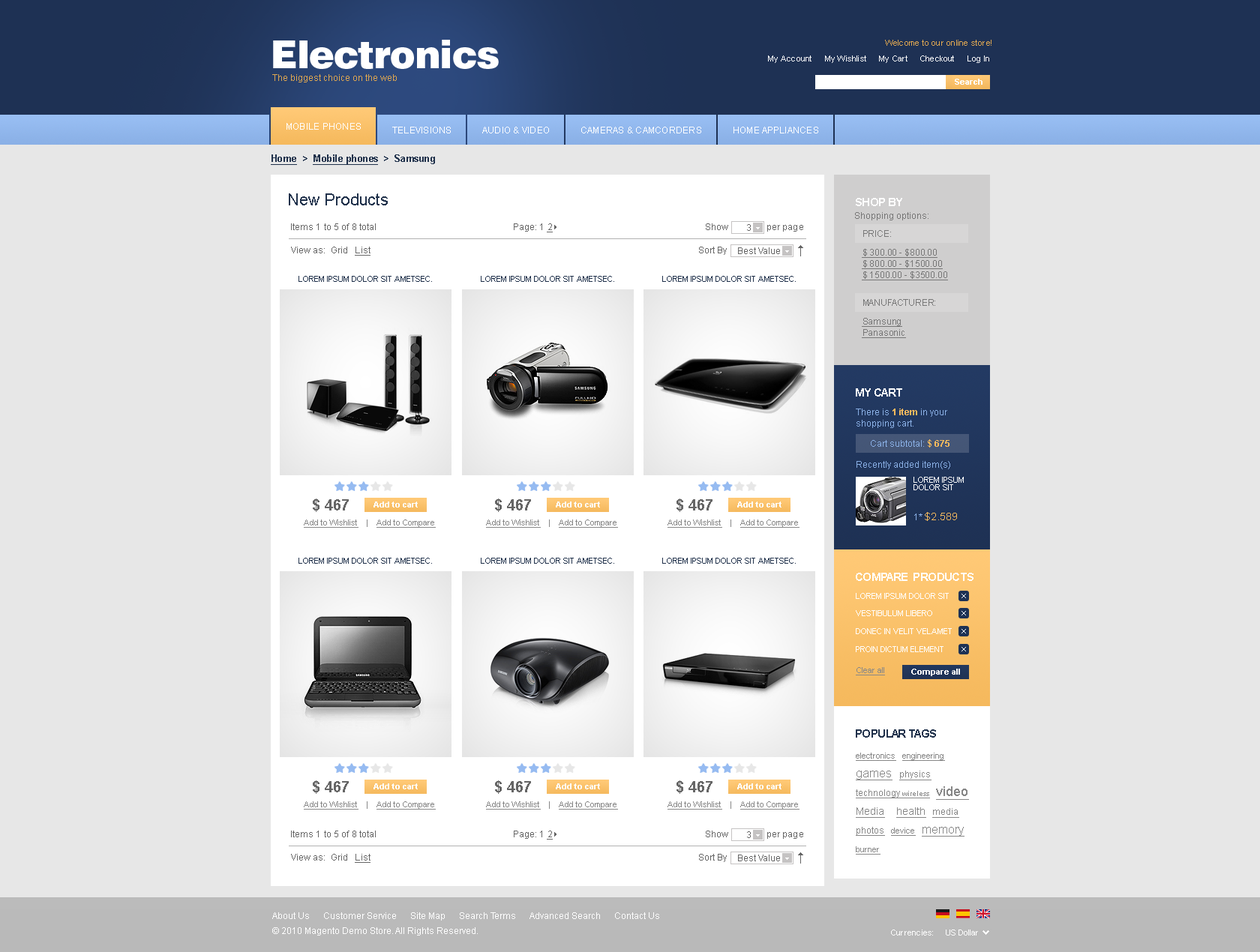
<style>
.page{position:relative;width:1260px;height:952px;background:#e7e7e7}
.page>*{position:absolute;margin:0}
.t1{font:38.2px "Swiss721BT-Black";letter-spacing:-0.02em;color:#ffffff}
.t2{font:8.2px "ArialMT";letter-spacing:0.02em;color:#dda651}
.t3{font:8.2px "ArialMT";letter-spacing:0.02em;color:#ffffff}
.t4{font:9px "ArialMT";color:#dda651}
.t5{font:8.2px "Arial-BoldMT";color:#fdfdfd}
.t6{font:9px "ArialMT";letter-spacing:0.02em;color:#ffffff;text-transform:uppercase}
.t7{font:9.8px "Arial-BoldMT";letter-spacing:-0.04em;color:#20314b;text-decoration:underline}
.t8{font:9.8px "Arial-BoldMT";letter-spacing:-0.04em;color:#20314b}
.t9{font:16.5px "ArialMT";color:#20314b}
.t10{font:11.2px "Arial-BoldMT";letter-spacing:-0.04em;color:#ffffff;text-transform:uppercase}
.t11{font:9px "ArialMT";color:#777777}
.t12{font:9px "ArialMT";letter-spacing:0.01em;color:#666666}
.t13{font:9px "ArialMT";letter-spacing:0.01em;color:#666666;text-decoration:underline}
.t14{font:9px "ArialMT";color:#666666}
.t15{font:9px "ArialMT";color:#777777;text-transform:uppercase}
.t16{font:9px/11.2px "ArialMT";color:#777777;text-decoration:underline}
.t17{font:8.2px "ArialMT";color:#20314b;text-transform:uppercase}
.t18{font:9px/11.2px "ArialMT";color:#8ab0e6}
.t19{font:9px/11.2px "Arial-BoldMT";color:#f5b95d}
.t20{font:9px "ArialMT";color:#8ab0e6}
.t21{font:9px "Arial-BoldMT";color:#f5b95d}
.t22{font:8.3px/7.5px "ArialMT";color:#ffffff;text-transform:uppercase}
.t23{font:15px "Arial-BoldMT";color:#666666}
.t24{font:8.2px "ArialMT";color:#878787;text-decoration:underline}
.t25{font:8.2px "ArialMT";color:#878787}
.t26{font:10.5px "ArialMT";color:#f5b95d;text-transform:uppercase}
.t27{font:8.3px "ArialMT";color:#ffffff;text-transform:uppercase}
.t28{font:8.3px/12px "ArialMT";color:#ffffff;text-transform:uppercase}
.t29{font:11.2px "Arial-BoldMT";letter-spacing:-0.04em;color:#20314b;text-transform:uppercase}
.t30{font:8.2px/18.7px "ArialMT";color:#878787;text-decoration:underline}
.t31{font:12px/18.7px "ArialMT";color:#878787;text-decoration:underline}
.t32{font:9px/18.7px "ArialMT";color:#878787;text-decoration:underline}
.t33{font:7.5px/18.7px "ArialMT";color:#878787;text-decoration:underline}
.t34{font:13.5px/18.7px "ArialMT";color:#878787;text-decoration:underline}
.t35{font:10.5px/15px "ArialMT";color:#878787;text-decoration:underline}
.t36{font:10.5px/18.7px "ArialMT";color:#878787;text-decoration:underline}
.t37{font:9px/15px "ArialMT";color:#ffffff}
.t38{font:8.2px "ArialMT";color:#ffffff}
</style>
<div class="page">
<p class="t1" style="left:273px;top:40px;width:226px;height:29px">Electronics</p>
<p class="t2" style="left:885px;top:40px;width:107px;height:6px">Welcome to our online store!</p>
<p class="t3" style="left:768px;top:56px;width:221px;height:7px">My Account     My Wishlist     My Cart     Checkout     Log In</p>
<p class="t4" style="left:272px;top:74px;width:125px;height:8px">The biggest choice on the web</p>
<p class="t5" style="left:955px;top:79px;width:27px;height:6px">Search</p>
<p class="t6" style="left:286px;top:123px;width:75px;height:7px">Mobile phones</p>
<p class="t6" style="left:392px;top:127px;width:59px;height:7px">Televisions</p>
<p class="t6" style="left:482px;top:127px;width:67px;height:7px">Audio &amp; Video</p>
<p class="t6" style="left:581px;top:127px;width:120px;height:7px">Cameras &amp; Camcorders</p>
<p class="t6" style="left:734px;top:127px;width:84px;height:7px">Home appliances</p>
<p class="t7" style="left:271px;top:154px;width:164px;height:11px">Home<span class="t8">  &gt;  </span>Mobile phones<span class="t8">  &gt;  Samsung</span></p>
<p class="t9" style="left:289px;top:194px;width:99px;height:12px">New Products</p>
<p class="t10" style="left:856px;top:198px;width:46px;height:8px">Shop by</p>
<p class="t11" style="left:855px;top:212px;width:73px;height:8px">Shopping options:</p>
<p class="t12" style="left:291px;top:224px;width:85px;height:6px">Items 1 to 5 of 8 total</p>
<p class="t12" style="left:514px;top:224px;width:39px;height:8px">Page: 1 <span class="t13">2</span></p>
<p class="t12" style="left:706px;top:224px;width:22px;height:6px">Show</p>
<p class="t14" style="left:747px;top:224px;width:4px;height:7px">3</p>
<p class="t12" style="left:767px;top:225px;width:36px;height:7px">per page</p>
<p class="t15" style="left:863px;top:230px;width:28px;height:7px">Price:</p>
<p class="t12" style="left:291px;top:247px;width:79px;height:9px">View as:  Grid   <span class="t13">List</span></p>
<p class="t12" style="left:699px;top:247px;width:28px;height:8px">Sort By</p>
<p class="t14" style="left:738px;top:248px;width:42px;height:6px">Best Value</p>
<p class="t16" style="left:862px;top:249px;width:86px;height:31px">$ 300.00 - $800.00<br>$ 800.00 - $1500.00<br>$ 1500.00 - $3500.00</p>
<p class="t17" style="left:298px;top:276px;width:134px;height:6px">Lorem ipsum dolor sit ametsec.</p>
<p class="t17" style="left:481px;top:276px;width:133px;height:6px">Lorem ipsum dolor sit ametsec.</p>
<p class="t17" style="left:662px;top:276px;width:134px;height:6px">Lorem ipsum dolor sit ametsec.</p>
<p class="t15" style="left:863px;top:299px;width:72px;height:7px">manufacturer:</p>
<p class="t16" style="left:862px;top:318px;width:44px;height:20px">Samsung<br>Panasonic</p>
<p class="t10" style="left:856px;top:388px;width:46px;height:9px">My Cart</p>
<p class="t18" style="left:856px;top:409px;width:91px;height:19px">There is <span class="t19">1 item</span> in your <br>shopping cart.</p>
<p class="t20" style="left:871px;top:440px;width:79px;height:8px">Cart subtotal: <span class="t21">$ 675</span></p>
<p class="t20" style="left:856px;top:461px;width:94px;height:9px">Recently added item(s)</p>
<p class="t22" style="left:914px;top:477px;width:50px;height:13px">Lorem ipsum <br>dolor sit <br><br>amet, consec.</p>
<p class="t23" style="left:313px;top:499px;width:36px;height:13px">$ 467</p>
<p class="t5" style="left:374px;top:502px;width:44px;height:6px">Add to cart</p>
<p class="t23" style="left:495px;top:499px;width:36px;height:13px">$ 467</p>
<p class="t5" style="left:556px;top:502px;width:44px;height:6px">Add to cart</p>
<p class="t23" style="left:676px;top:499px;width:36px;height:13px">$ 467</p>
<p class="t5" style="left:737px;top:502px;width:45px;height:6px">Add to cart</p>
<p class="t24" style="left:304px;top:520px;width:132px;height:8px">Add to Wishlist<span class="t25">    |    </span>Add to Compare</p>
<p class="t24" style="left:486px;top:520px;width:132px;height:8px">Add to Wishlist<span class="t25">    |    </span>Add to Compare</p>
<p class="t24" style="left:668px;top:520px;width:132px;height:8px">Add to Wishlist<span class="t25">    |    </span>Add to Compare</p>
<p class="t26" style="left:914px;top:512px;width:43px;height:9px"><span class="t20">1* </span>$2.589</p>
<p class="t17" style="left:298px;top:558px;width:134px;height:6px">Lorem ipsum dolor sit ametsec.</p>
<p class="t17" style="left:481px;top:558px;width:133px;height:6px">Lorem ipsum dolor sit ametsec.</p>
<p class="t17" style="left:662px;top:558px;width:134px;height:6px">Lorem ipsum dolor sit ametsec.</p>
<p class="t10" style="left:856px;top:573px;width:118px;height:8px">Compare  Products</p>
<p class="t27" style="left:856px;top:593px;width:93px;height:6px">Lorem ipsum dolor sit amet, consec.</p>
<p class="t28" style="left:856px;top:610px;width:76px;height:6px">Vestibulum libero<br> nisl</p>
<p class="t28" style="left:856px;top:628px;width:96px;height:6px">Donec in velit velamet<br> consec.</p>
<p class="t28" style="left:856px;top:646px;width:88px;height:6px">Proin dictum element<br>um velit</p>
<p class="t24" style="left:856px;top:668px;width:29px;height:8px">Clear all</p>
<p class="t5" style="left:911px;top:669px;width:49px;height:7px">Compare all</p>
<p class="t29" style="left:856px;top:730px;width:80px;height:8px">Popular Tags</p>
<p class="t30" style="left:856px;top:753px;width:113px;height:102px">electronics   engineering   <br><span class="t31">games   </span><span class="t32">physics   <br>technology </span><span class="t33">wireless   </span><span class="t34">video   <br></span><span class="t35">Media    </span><span class="t36">health   </span><span class="t32">media   <br>photos   </span>device   <span class="t31">memory   <br></span>burner</p>
<p class="t23" style="left:313px;top:781px;width:36px;height:13px">$ 467</p>
<p class="t5" style="left:374px;top:784px;width:44px;height:6px">Add to cart</p>
<p class="t23" style="left:495px;top:781px;width:36px;height:13px">$ 467</p>
<p class="t5" style="left:556px;top:784px;width:44px;height:6px">Add to cart</p>
<p class="t23" style="left:676px;top:781px;width:36px;height:13px">$ 467</p>
<p class="t5" style="left:737px;top:784px;width:45px;height:6px">Add to cart</p>
<p class="t24" style="left:304px;top:802px;width:132px;height:8px">Add to Wishlist<span class="t25">    |    </span>Add to Compare</p>
<p class="t24" style="left:486px;top:802px;width:132px;height:8px">Add to Wishlist<span class="t25">    |    </span>Add to Compare</p>
<p class="t24" style="left:668px;top:802px;width:132px;height:8px">Add to Wishlist<span class="t25">    |    </span>Add to Compare</p>
<p class="t12" style="left:291px;top:831px;width:85px;height:7px">Items 1 to 5 of 8 total</p>
<p class="t12" style="left:514px;top:831px;width:39px;height:9px">Page: 1 <span class="t13">2</span></p>
<p class="t12" style="left:706px;top:831px;width:22px;height:7px">Show</p>
<p class="t14" style="left:747px;top:832px;width:4px;height:6px">3</p>
<p class="t12" style="left:767px;top:832px;width:36px;height:7px">per page</p>
<p class="t12" style="left:291px;top:854px;width:79px;height:9px">View as:  Grid   <span class="t13">List</span></p>
<p class="t12" style="left:699px;top:854px;width:28px;height:8px">Sort By</p>
<p class="t14" style="left:738px;top:855px;width:42px;height:7px">Best Value</p>
<p class="t37" style="left:272px;top:913px;width:387px;height:23px">About Us      Customer Service      Site Map      Search Terms      Advanced Search      Contact Us<br>© 2010 Magento Demo Store. All Rights Reserved.</p>
<p class="t3" style="left:891px;top:930px;width:42px;height:6px">Currencies:</p>
<p class="t38" style="left:946px;top:930px;width:32px;height:6px">US Dollar</p>
</div>
